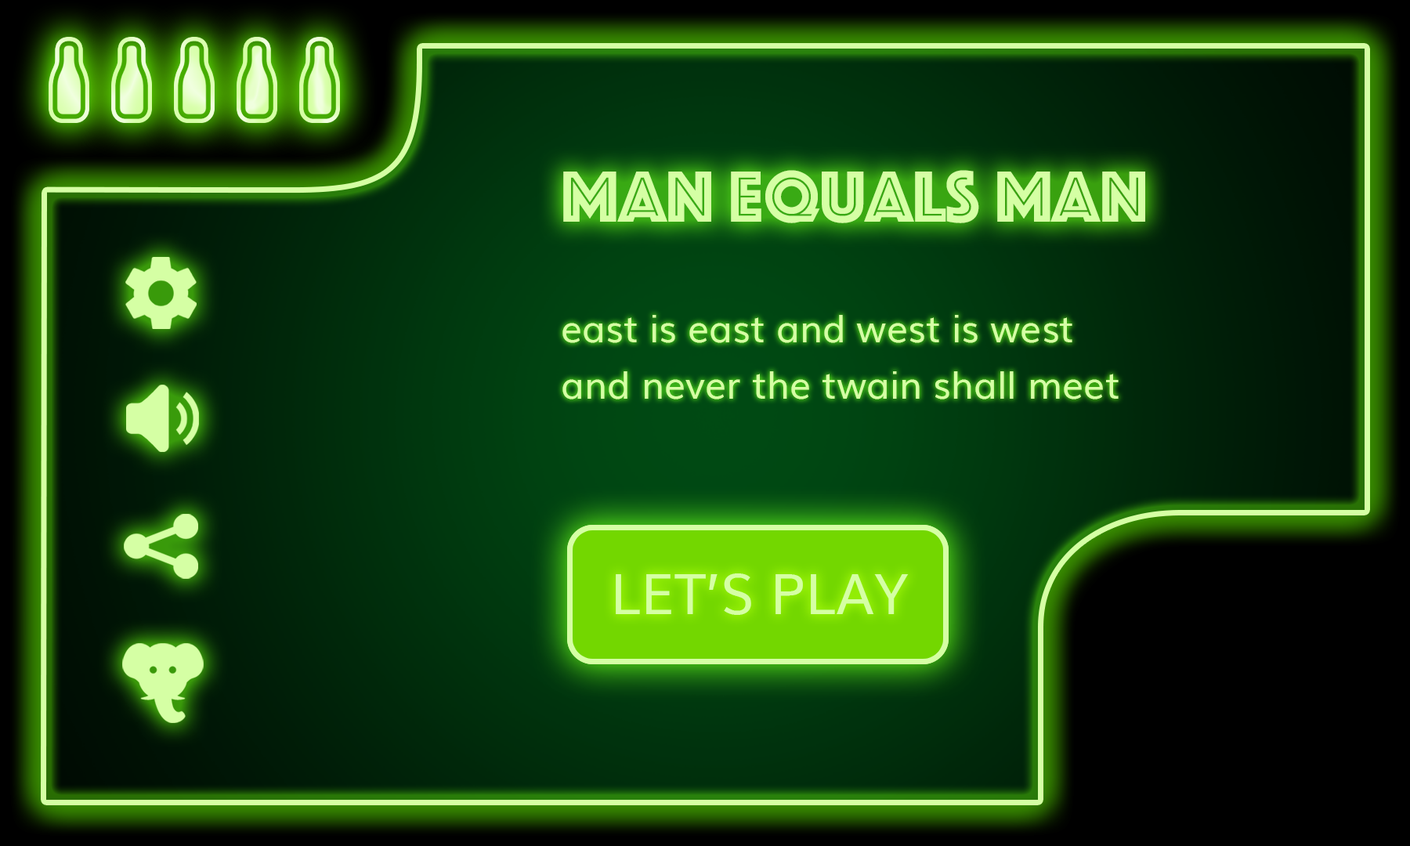
<style>
.page{position:relative;width:1410px;height:846px}
.page>*{position:absolute;margin:0}
.t1{font:75.2px "Phosphate-Inline";color:#d5ffa4}
.t2{font:37.6px/56.4px "Muli";color:#d5ffa4}
.t3{font:56.4px "Muli";color:#d5ffa4}
</style>
<div class="page">
<p class="t1" style="left:563px;top:170px;width:582px;height:53px">Man equals man</p>
<p class="t2" style="left:562px;top:315px;width:556px;height:84px">east is east and west is west<br>and never the twain shall meet</p>
<p class="t3" style="left:616px;top:573px;width:293px;height:42px">LET’S PLAY</p>
</div>
